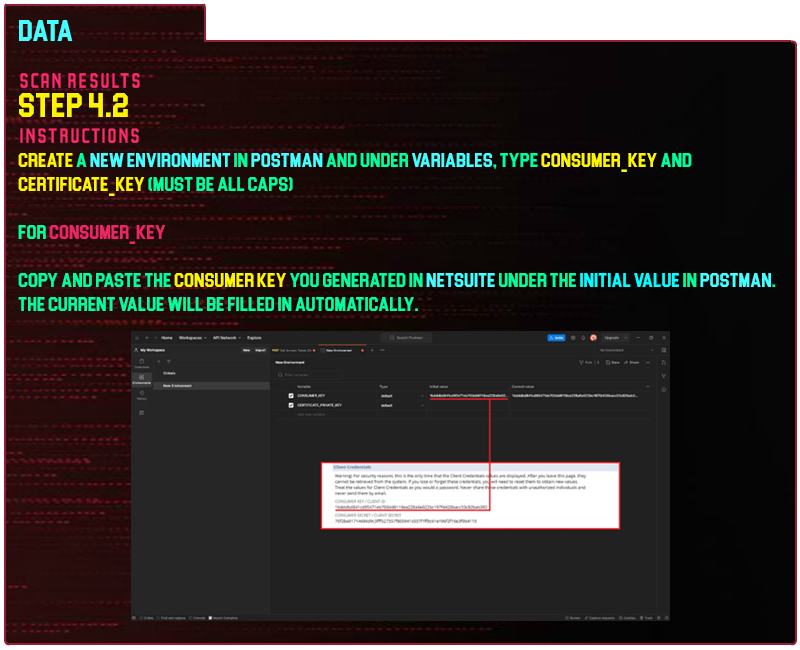
<style>
.page{position:relative;width:800px;height:650px}
.page>*{position:absolute;margin:0}
.t1{font:30px "Blockletter";color:#43ffff}
.t2{font:35px "Party-Lights-[WLM]-Flat";color:#ff296d}
.t3{font:35px "Blockletter";color:#fdf500}
.t4{font:20px "Blockletter";color:#00ff9f}
.t5{font:20px "Blockletter";color:#fdf500}
.t6{font:20px "Blockletter";color:#43ffff}
.t7{font:20px "Blockletter";color:#eb2664}
.t8{font:20px "Blockletter";color:#00ffff}
</style>
<div class="page">
<p class="t1" style="left:19px;top:20px;width:54px;height:21px">Data</p>
<p class="t2" style="left:20px;top:73px;width:120px;height:15px">Scan REsults</p>
<p class="t3" style="left:19px;top:93px;width:109px;height:24px">step 4.2</p>
<p class="t2" style="left:20px;top:128px;width:119px;height:15px">instructions</p>
<p class="t4" style="left:18px;top:153px;width:758px;height:158px"><span class="t5">create</span> a <span class="t6">new environment</span> in <span class="t6">postman</span> and under <span class="t6">variables</span>, type <span class="t5">consumer_key</span> and <span class="t5">certificate_Key</span> (must be all caps)<br><br>for <span class="t7">consumer_key<br><br></span>copy and paste the <span class="t5">consumer key</span> you generated in <span class="t6">netsuite</span> under the <span class="t8">initial value</span> in <span class="t6">postman</span>. the current value will be filled in automatically.</p>
</div>
